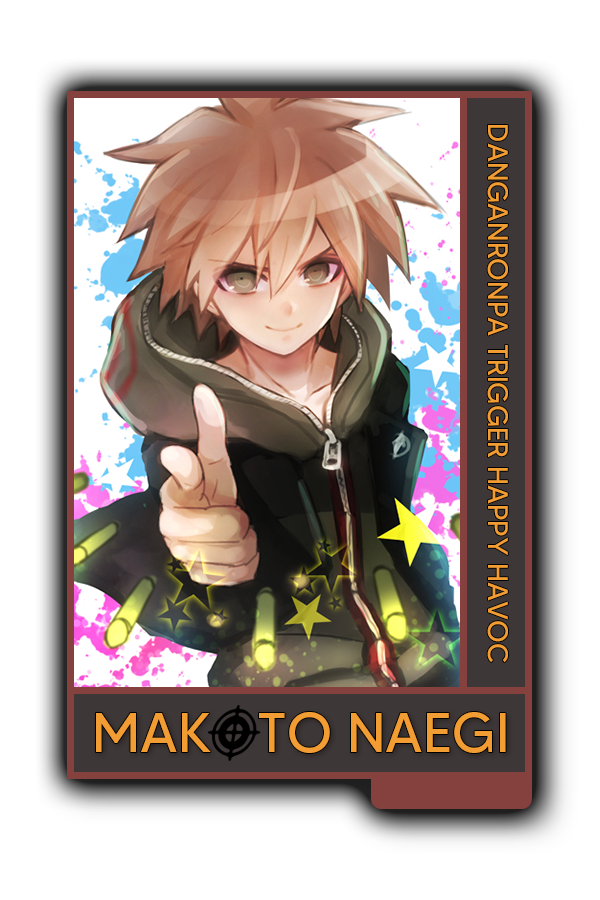
<style>
.page{position:relative;width:600px;height:900px;background:#ffffff}
.page>*{position:absolute;margin:0}
.t1{font:28.2px "MADETOMMY";color:#f29d33}
.t2{font:56px "MADETOMMY";color:#f29d33}
</style>
<div class="page">
<p class="t1" style="left:487px;top:125px;width:21px;height:538px;rotate:90deg">DANGANRONPA TRIGGER HAPPY HAVOC</p>
<p class="t2" style="left:96px;top:712px;width:410px;height:41px">MAKOTO NAEGI</p>
</div>
